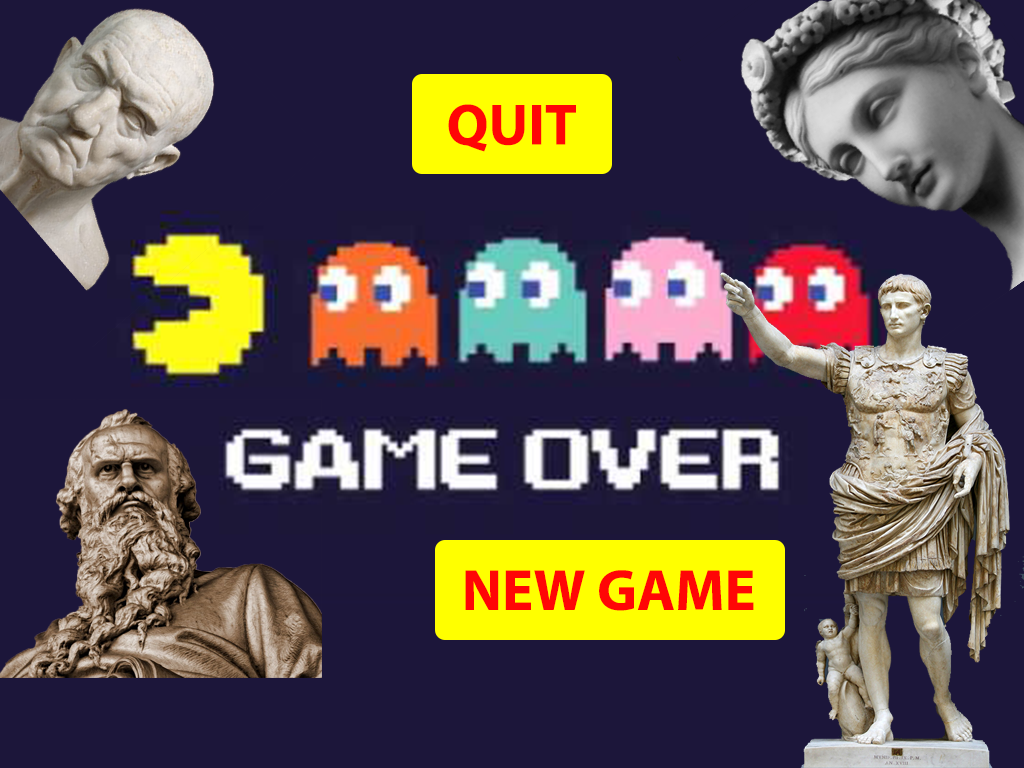
<style>
.page{position:relative;width:1024px;height:768px;background:#1c163a}
.page>*{position:absolute;margin:0}
.t1{font:58.3px "MyriadPro-Bold";color:#ff0606}
</style>
<div class="page">
<p class="t1" style="left:448px;top:104px;width:128px;height:48px">QUIT</p>
<p class="t1" style="left:465px;top:570px;width:289px;height:41px">NEW GAME</p>
</div>
